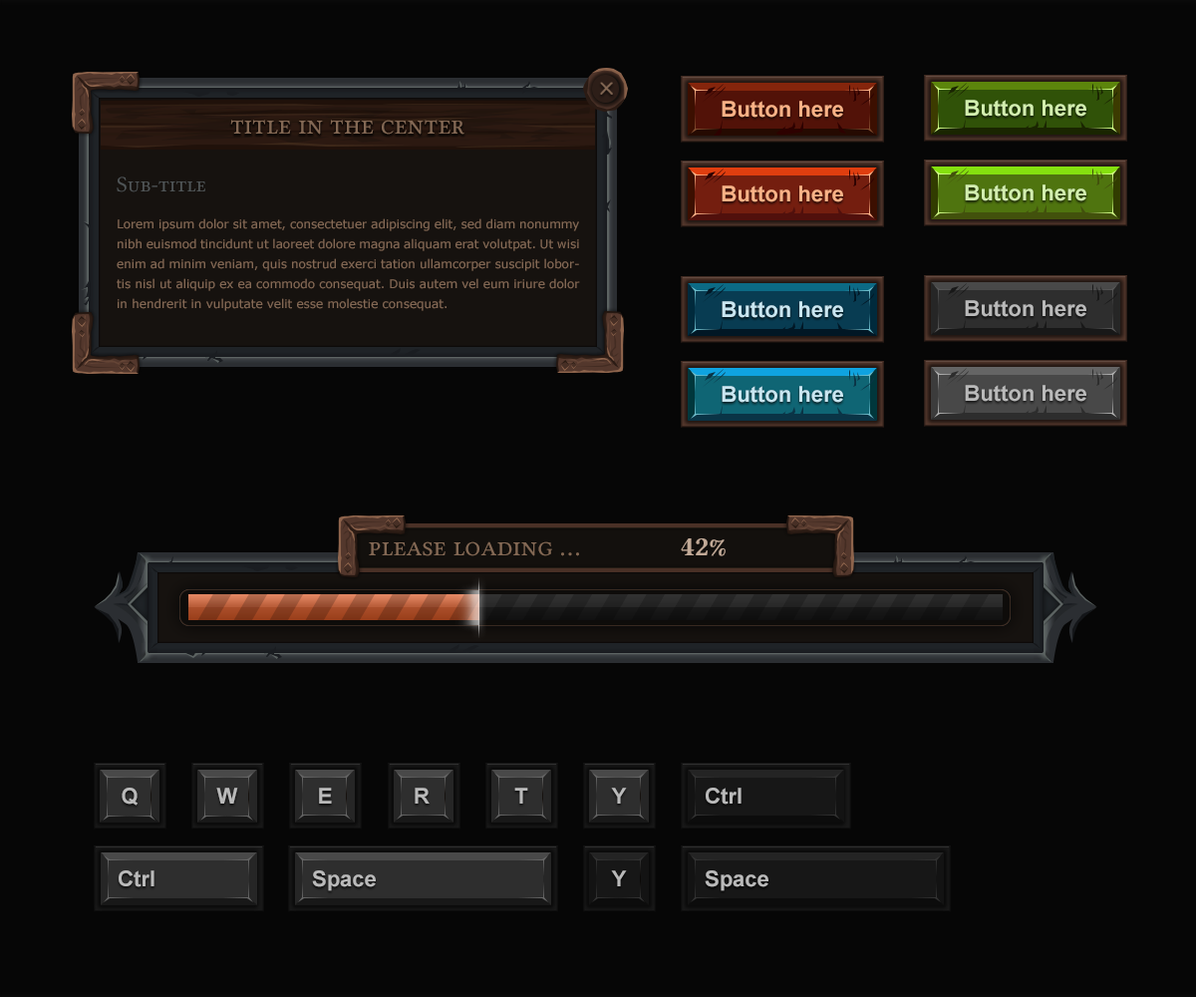
<style>
.page{position:relative;width:1196px;height:997px;background:#060606}
.page>*{position:absolute;margin:0}
.t1{font:21.9px "Arial-BoldMT";color:#fab186}
.t2{font:21.9px "Arial-BoldMT";color:#d2eeae}
.t3{font:27.9px "LinLibertineCapitals";color:#836854}
.t4{font:21.9px "LinLibertineCapitals";color:#4f5456}
.t5{font:12px/19.9px "Verdana";color:#836854}
.t6{font:21.9px "Arial-BoldMT";color:#c9e6f1}
.t7{font:21.9px "Arial-BoldMT";color:#bababa}
.t8{font:27.9px "LinLibertineCapitalsB";color:#c2aa97}
</style>
<div class="page">
<p class="t1" style="left:722px;top:101px;width:121px;height:17px">Button here</p>
<p class="t2" style="left:965px;top:100px;width:122px;height:17px">Button here</p>
<p class="t3" style="left:230px;top:120px;width:235px;height:15px">title in the center</p>
<p class="t4" style="left:117px;top:176px;width:88px;height:16px">Sub-title</p>
<p class="t1" style="left:722px;top:185px;width:121px;height:17px">Button here</p>
<p class="t2" style="left:965px;top:184px;width:122px;height:17px">Button here</p>
<p class="t5" style="left:117px;top:218px;width:463px;height:93px;text-align:justify">Lorem ipsum dolor sit amet, consectetuer adipiscing elit, sed diam nonummy nibh euismod tincidunt ut laoreet dolore magna aliquam erat volutpat. Ut wisi enim ad minim veniam, quis nostrud exerci tation ullamcorper suscipit lobortis nisl ut aliquip ex ea commodo consequat. Duis autem vel eum iriure dolor in hendrerit in vulputate velit esse molestie consequat.</p>
<p class="t6" style="left:722px;top:301px;width:121px;height:17px">Button here</p>
<p class="t7" style="left:965px;top:300px;width:122px;height:17px">Button here</p>
<p class="t6" style="left:722px;top:386px;width:121px;height:17px">Button here</p>
<p class="t7" style="left:965px;top:385px;width:122px;height:17px">Button here</p>
<p class="t3" style="left:369px;top:541px;width:210px;height:15px">please loading ...</p>
<p class="t8" style="left:681px;top:538px;width:45px;height:18px">42%</p>
<p class="t7" style="left:122px;top:788px;width:16px;height:17px">Q</p>
<p class="t7" style="left:216px;top:788px;width:22px;height:15px">W</p>
<p class="t7" style="left:319px;top:788px;width:13px;height:15px">E</p>
<p class="t7" style="left:415px;top:788px;width:15px;height:15px">R</p>
<p class="t7" style="left:514px;top:788px;width:14px;height:15px">T</p>
<p class="t7" style="left:611px;top:788px;width:16px;height:15px">Y</p>
<p class="t7" style="left:706px;top:788px;width:36px;height:16px">Ctrl</p>
<p class="t7" style="left:119px;top:870px;width:36px;height:17px">Ctrl</p>
<p class="t7" style="left:312px;top:870px;width:64px;height:21px">Space</p>
<p class="t7" style="left:611px;top:870px;width:16px;height:16px">Y</p>
<p class="t7" style="left:705px;top:870px;width:64px;height:21px">Space</p>
</div>
